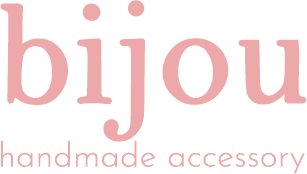
<style>
.page{position:relative;width:307px;height:174px;background:#ffffff}
.page>*{position:absolute;margin:0}
.t1{font:145.8px "BellMT";color:#eda9a9;font-weight:bold}
.t2{font:34px "JosefinSans-Light";color:#eda9a9;font-weight:bold}
</style>
<div class="page">
<p class="t1" style="left:0px;top:0px;width:307px;height:142px">bijou</p>
<p class="t2" style="left:1px;top:140px;width:304px;height:34px">handmade accessory</p>
</div>
